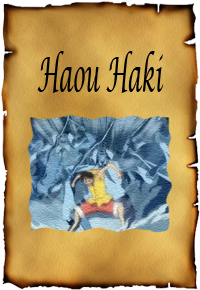
<style>
.page{position:relative;width:200px;height:290px}
.page>*{position:absolute;margin:0}
.t1{font:48px "LucidaCalligraphy-Italic";color:#000000;scale:0.43 1}
</style>
<div class="page">
<p class="t1" style="left:37px;top:51px;width:127px;height:42px">Haou Haki</p>
</div>
